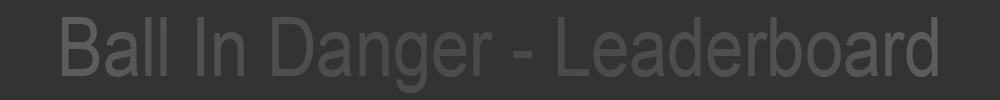
<style>
.page{position:relative;width:1000px;height:100px;background:#333333}
.page>*{position:absolute;margin:0}
.t1{font:81.9px "ArialMT";color:#4f4f4f;scale:0.84 1}
</style>
<div class="page">
<p class="t1" style="left:62px;top:17px;width:876px;height:76px">Ball In Danger - Leaderboard</p>
</div>
